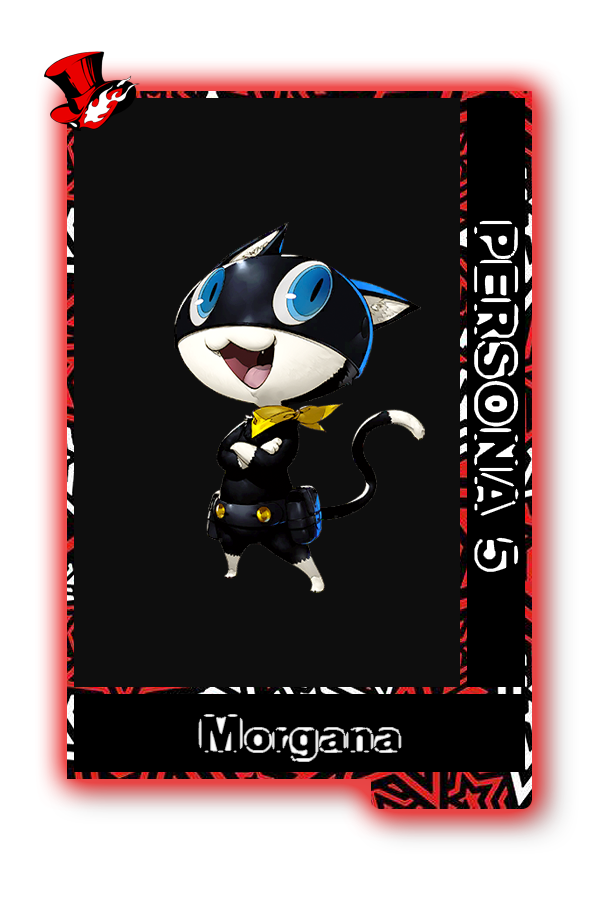
<style>
.page{position:relative;width:600px;height:900px;background:#0e0e0e}
.page>*{position:absolute;margin:0}
.t1{font:41.7px "Untitled";color:#ffffff}
.t2{font:37.5px "Untitled";letter-spacing:-0.06em;color:#fdfdfd}
</style>
<div class="page">
<p class="t1" style="left:475px;top:221px;width:43px;height:350px;rotate:90deg">PERSONA 5</p>
<p class="t2" style="left:199px;top:715px;width:202px;height:46px">Morgana</p>
</div>
